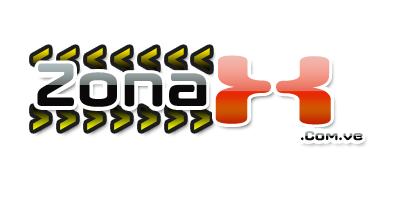
<style>
.page{position:relative;width:400px;height:200px;background:#ffffff}
.page>*{position:absolute;margin:0}
.t1{font:62.6px "AxaxaxRg-Bold";scale:0.96 1}
.t2{font:98.9px "AxaxaxRg-Bold";scale:1.92 1}
.t3{font:12.8px "AxaxaxRg-Bold";scale:1.1 1}
</style>
<div class="page">
<p class="t1" style="left:37px;top:63px;width:170px;height:44px">Zona</p>
<p class="t2" style="left:215px;top:55px;width:116px;height:70px">X</p>
<p class="t3" style="left:301px;top:131px;width:62px;height:10px">.Com.ve</p>
</div>
